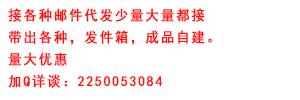
<style>
.page{position:relative;width:300px;height:100px;background:#ffffff}
.page>*{position:absolute;margin:0}
.t1{font:14px/21.9px "SimHei";letter-spacing:0.12em;color:#ff0000;font-weight:bold;scale:0.95 1}
</style>
<div class="page">
<p class="t1" style="left:8px;top:8px;width:204px;height:80px;opacity:0.97">接各种邮件代发少量大量都接<br>带出各种，发件箱，成品自建。<br>量大优惠<br>加Q详谈：2250053084</p>
</div>
